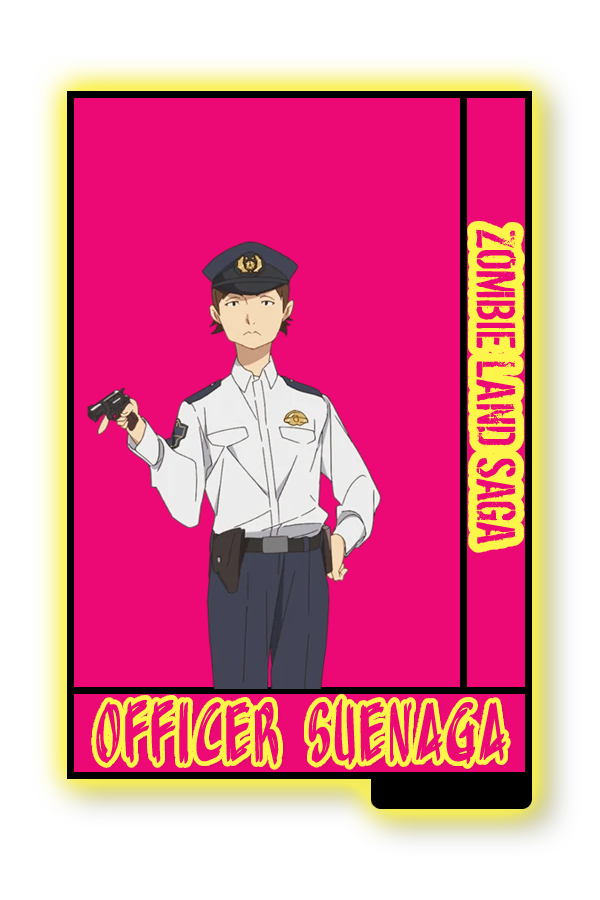
<style>
.page{position:relative;width:600px;height:900px;background:#ec0976}
.page>*{position:absolute;margin:0}
.t1{font:60.3px "DirtyEgo";color:#ec0976;scale:1.05 1}
.t2{font:72.2px "AnuDaw";color:#ec0976;scale:0.47 1}
</style>
<div class="page">
<p class="t1" style="left:476px;top:229px;width:41px;height:316px;rotate:90deg">ZOMBIE LAND SAGA</p>
<p class="t2" style="left:96px;top:698px;width:410px;height:68px">Officer Suenaga</p>
</div>
